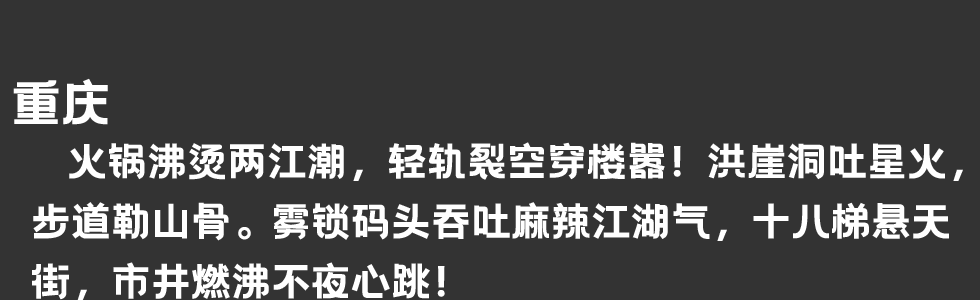
<style>
.page{position:relative;width:980px;height:300px;background:#333333}
.page>*{position:absolute;margin:0}
.t1{font:50px "HelloFont-WenYiHei";color:#ffffff}
.t2{font:40px/60px "HelloFont-WenYiHei";color:#ffffff}
</style>
<div class="page">
<p class="t1" style="left:13px;top:78px;width:95px;height:47px">重庆</p>
<p class="t2" style="left:32px;top:142px;width:931px;height:159px">火锅沸烫两江潮，轻轨裂空穿楼嚣！洪崖洞吐星火，<br>步道勒山骨。雾锁码头吞吐麻辣江湖气，十八梯悬天<br>街，市井燃沸不夜心跳！</p>
</div>
